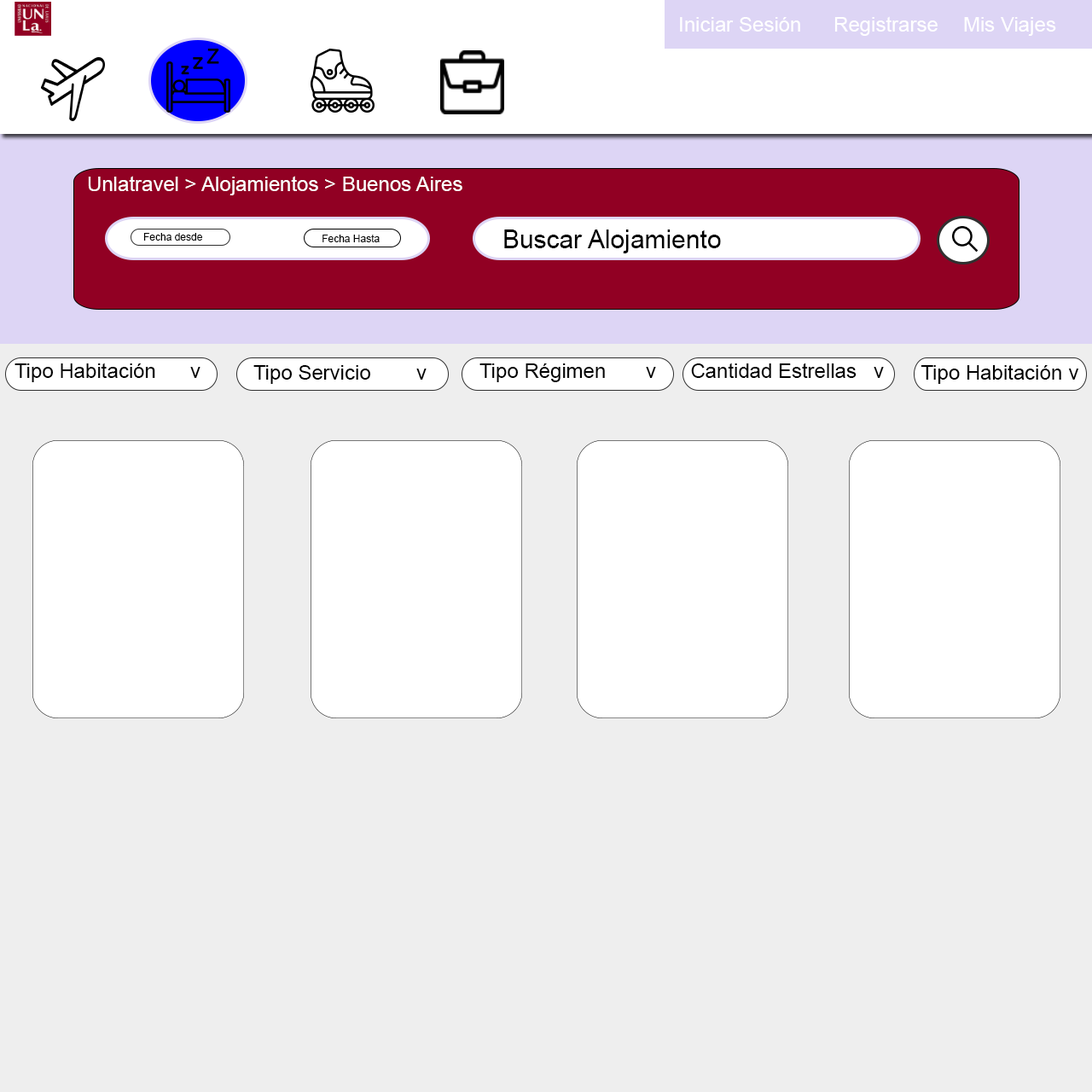
<style>
.page{position:relative;width:1092px;height:1092px;background:#eeeeee}
.page>*{position:absolute;margin:0}
.t1{font:20.5px "ArialMT";color:#ffffff}
.t2{font:10.2px "ArialMT";color:#000000}
.t3{font:25.6px "ArialMT";color:#000000}
.t4{font:20.5px "ArialMT";color:#000000}
</style>
<div class="page">
<p class="t1" style="left:680px;top:17px;width:120px;height:15px">Iniciar Sesión</p>
<p class="t1" style="left:834px;top:16px;width:104px;height:20px">Registrarse</p>
<p class="t1" style="left:964px;top:17px;width:92px;height:19px">Mis Viajes</p>
<p class="t1" style="left:88px;top:176px;width:374px;height:19px">Unlatravel &gt; Alojamientos &gt; Buenos Aires</p>
<p class="t2" style="left:143px;top:233px;width:59px;height:8px">Fecha desde</p>
<p class="t3" style="left:504px;top:229px;width:217px;height:24px">Buscar Alojamiento</p>
<p class="t2" style="left:322px;top:235px;width:58px;height:7px">Fecha Hasta</p>
<p class="t4" style="left:15px;top:363px;width:185px;height:19px">Tipo Habitación      v</p>
<p class="t4" style="left:253px;top:365px;width:174px;height:19px">Tipo Servicio        v</p>
<p class="t4" style="left:479px;top:363px;width:177px;height:19px">Tipo Régimen       v</p>
<p class="t4" style="left:691px;top:363px;width:193px;height:15px">Cantidad Estrellas   v</p>
<p class="t4" style="left:921px;top:364px;width:140px;height:20px">Tipo Habitación</p>
<p class="t4" style="left:1068px;top:369px;width:11px;height:11px">v</p>
</div>
